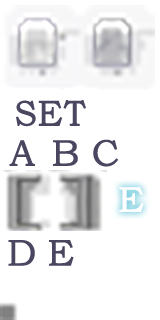
<style>
.page{position:relative;width:160px;height:320px;background:#ffffff}
.page>*{position:absolute;margin:0}
.t1{font:36px "BookmanOldStyle";color:#4a4660;font-weight:bold;scale:0.96 1}
.t2{font:37.1px "BookmanOldStyle";color:#4a4660;font-weight:bold}
.t3{font:35.8px "BookmanOldStyle";color:#ffffff;font-weight:bold}
</style>
<div class="page">
<p class="t1" style="left:16px;top:100px;width:70px;height:27px">SET</p>
<p class="t2" style="left:9px;top:140px;width:26px;height:26px">A</p>
<p class="t2" style="left:53px;top:140px;width:25px;height:26px">B</p>
<p class="t2" style="left:93px;top:139px;width:26px;height:28px">C</p>
<p class="t3" style="left:119px;top:187px;width:25px;height:25px">E</p>
<p class="t2" style="left:8px;top:240px;width:27px;height:26px">D</p>
<p class="t2" style="left:49px;top:240px;width:25px;height:26px">E</p>
</div>
